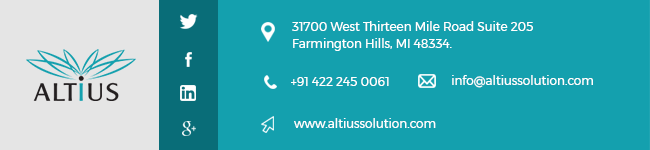
<style>
.page{position:relative;width:650px;height:150px;background:#14a0ae}
.page>*{position:absolute;margin:0}
.t1{font:12px/20px "Montserrat-Regular";color:#ffffff}
.t2{font:12px "Montserrat-Regular";color:#ffffff}
</style>
<div class="page">
<p class="t1" style="left:292px;top:21px;width:241px;height:30px">31700 West Thirteen Mile Road Suite 205<br>Farmington Hills, MI 48334.</p>
<p class="t2" style="left:291px;top:77px;width:98px;height:9px">+91 422 245 0061</p>
<p class="t2" style="left:452px;top:75px;width:141px;height:13px">info@altiussolution.com</p>
<p class="t2" style="left:294px;top:118px;width:142px;height:10px">www.altiussolution.com</p>
</div>
